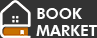
<style>
.page{position:relative;width:97px;height:38px;background:#333333}
.page>*{position:absolute;margin:0}
.t1{font:15.5px/17.2px "FuturaBT-Heavy";letter-spacing:-0.005em;color:#ffffff}
</style>
<div class="page">
<p class="t1" style="left:36px;top:8px;width:61px;height:28px">BOOK<br>MARKET</p>
</div>
